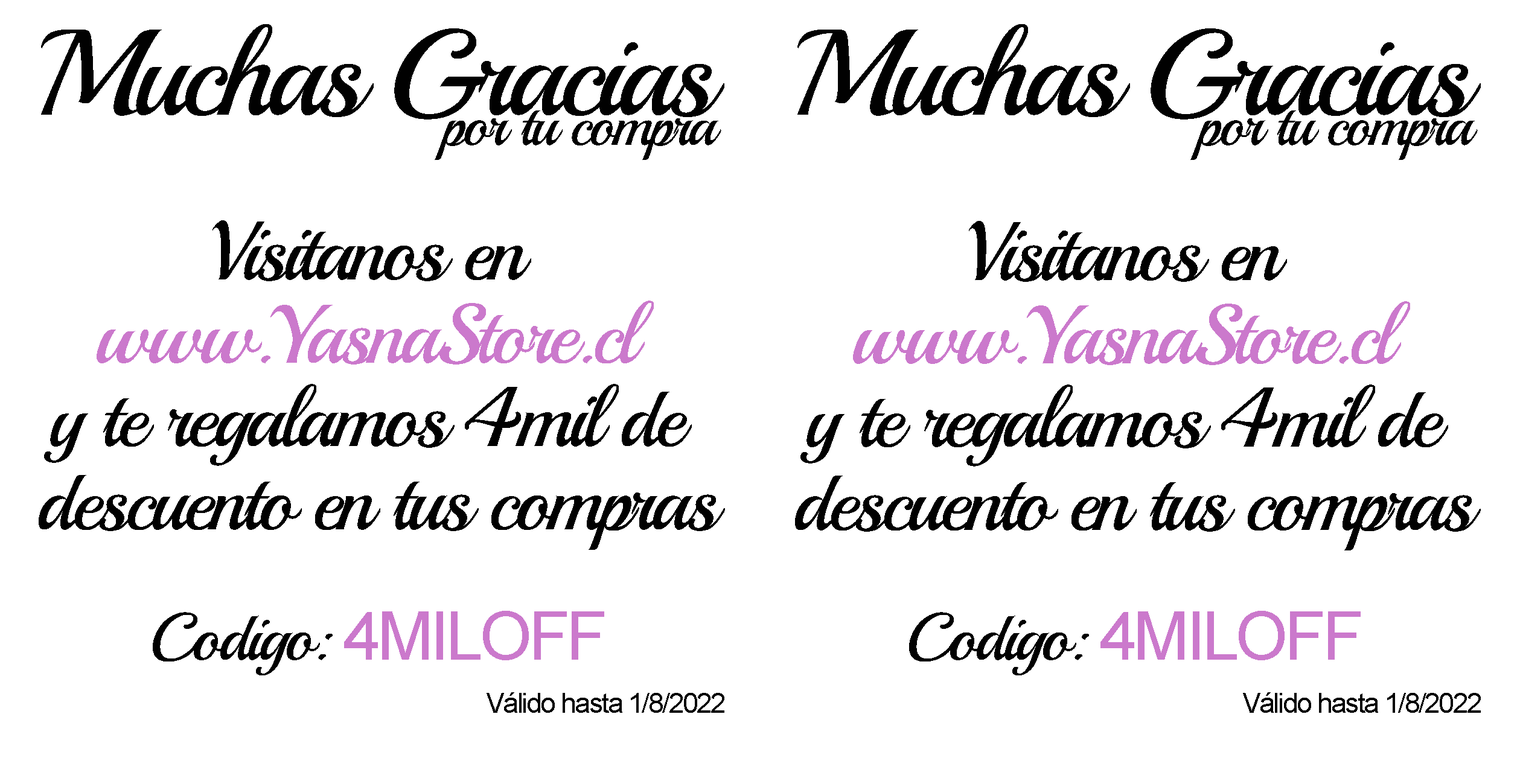
<style>
.page{position:relative;width:1520px;height:784px;background:#ffffff}
.page>*{position:absolute;margin:0}
.t1{font:122px/30.2px "Playball-Regular";letter-spacing:-0.05em;color:#010101}
.t2{font:60.4px/30.2px "Playball-Regular";letter-spacing:-0.05em;color:#010101}
.t3{font:83.3px/83.3px "Playball-Regular";letter-spacing:-0.05em;color:#010101}
.t4{font:83.3px/83.3px "Playball-Regular";letter-spacing:-0.05em;color:#cb79cc}
.t5{font:67.2px "Playball-Regular";letter-spacing:-0.05em;color:#010101}
.t6{font:67.2px "ArialMT";letter-spacing:-0.05em;color:#cb79cc}
.t7{font:67.3px "Playball-Regular";letter-spacing:-0.05em;color:#010101}
.t8{font:67.3px "ArialMT";letter-spacing:-0.05em;color:#cb79cc}
.t9{font:27.7px "ArialMT";letter-spacing:-0.05em;color:#010101}
</style>
<div class="page">
<p class="t1" style="left:41px;top:24px;width:684px;height:136px;text-align:center">Muchas Gracias<br><span class="t2">                           por tu compra</span></p>
<p class="t1" style="left:798px;top:24px;width:683px;height:136px;text-align:center">Muchas Gracias<br><span class="t2">                           por tu compra</span></p>
<p class="t3" style="left:39px;top:220px;width:686px;height:330px;text-align:center">Visitanos en <br><span class="t4">www.YasnaStore.cl <br></span>y te regalamos 4mil de <br>descuento en tus compras</p>
<p class="t3" style="left:795px;top:221px;width:686px;height:330px;text-align:center">Visitanos en <br><span class="t4">www.YasnaStore.cl <br></span>y te regalamos 4mil de <br>descuento en tus compras</p>
<p class="t5" style="left:153px;top:611px;width:451px;height:65px">Codigo: <span class="t6">4MILOFF</span></p>
<p class="t7" style="left:909px;top:611px;width:452px;height:65px">Codigo: <span class="t8">4MILOFF</span></p>
<p class="t9" style="left:487px;top:693px;width:238px;height:20px">Válido hasta 1/8/2022</p>
<p class="t9" style="left:1243px;top:693px;width:238px;height:20px">Válido hasta 1/8/2022</p>
</div>
